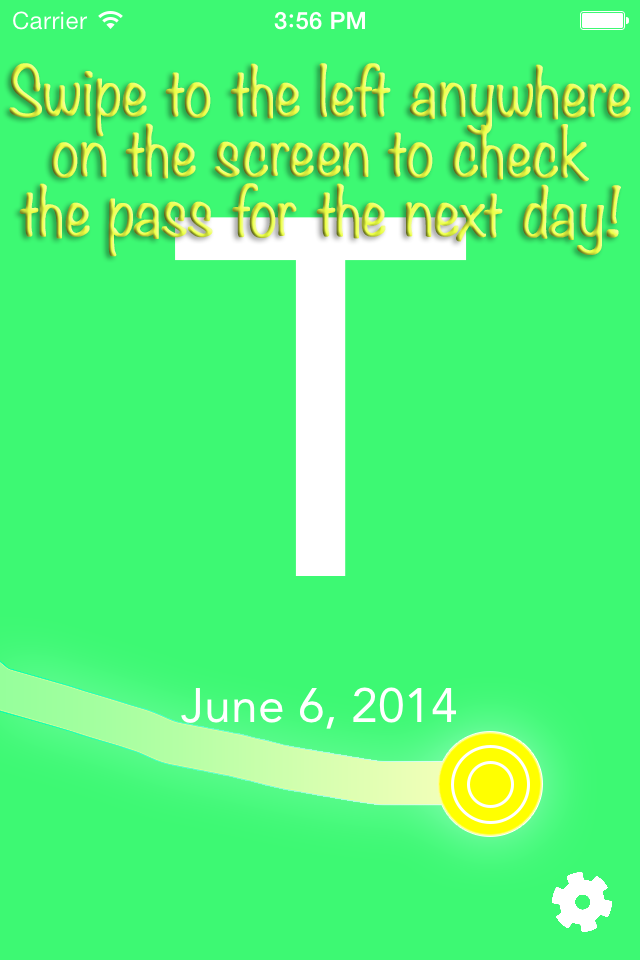
<style>
.page{position:relative;width:640px;height:960px;background:#3df973}
.page>*{position:absolute;margin:0}
.t1{font:60px/60px "Noteworthy-Light";letter-spacing:-0.01em;font-weight:bold}
</style>
<div class="page">
<p class="t1" style="left:9px;top:63px;width:622px;height:194px;text-align:center">Swipe to the left anywhere<br> on the screen to check <br>the pass for the next day!</p>
</div>
